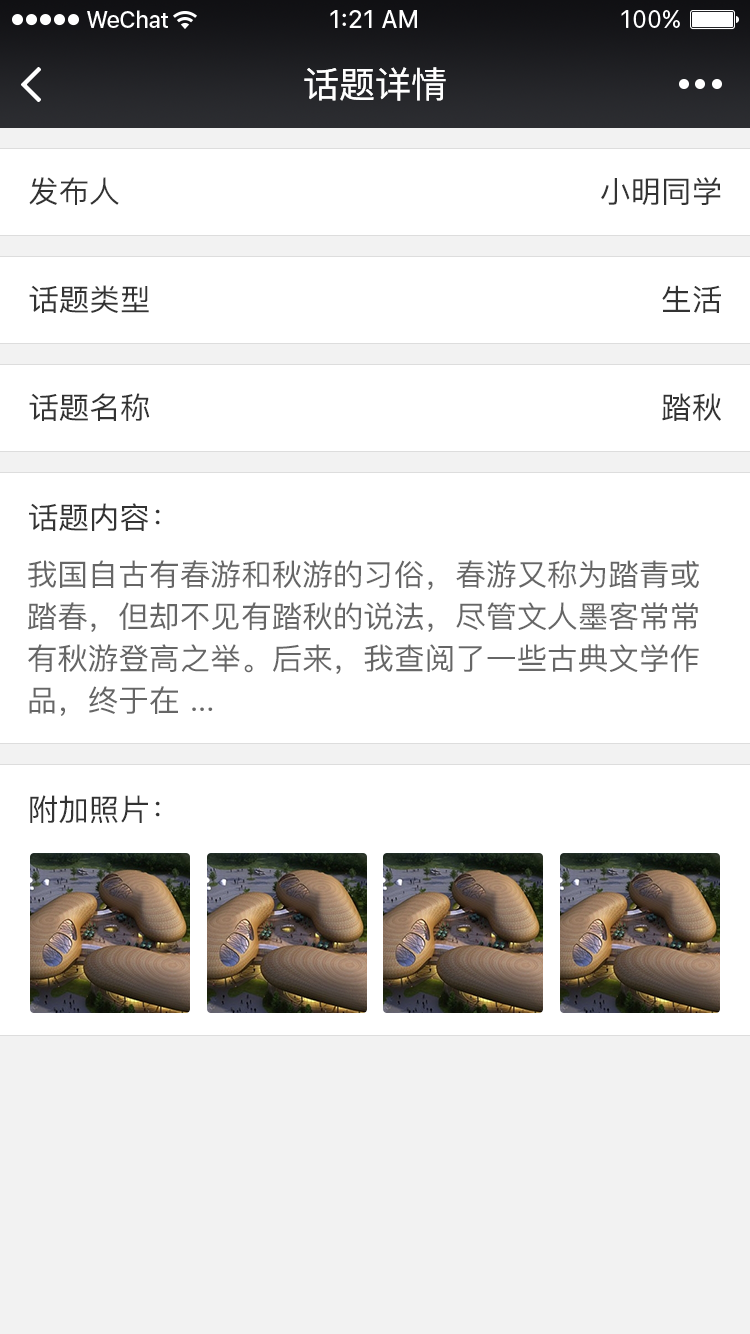
<style>
.page{position:relative;width:750px;height:1334px;background:#ffffff}
.page>*{position:absolute;margin:0}
.t1{font:36px "PingFang-SC-Medium";color:#ffffff}
.t2{font:30px "PingFang-SC-Medium";color:#333333}
.t3{font:30px/42px "PingFang-SC-Medium";color:#666666}
</style>
<div class="page">
<p class="t1" style="left:304px;top:67px;width:142px;height:34px">话题详情</p>
<p class="t2" style="left:29px;top:177px;width:90px;height:28px">发布人</p>
<p class="t2" style="left:601px;top:177px;width:120px;height:28px">小明同学</p>
<p class="t2" style="left:29px;top:285px;width:120px;height:28px">话题类型</p>
<p class="t2" style="left:662px;top:285px;width:59px;height:28px">生活</p>
<p class="t2" style="left:29px;top:393px;width:121px;height:28px">话题名称</p>
<p class="t2" style="left:662px;top:393px;width:59px;height:28px">踏秋</p>
<p class="t2" style="left:29px;top:503px;width:131px;height:28px">话题内容：</p>
<p class="t3" style="left:28px;top:560px;width:671px;height:156px">我国自古有春游和秋游的习俗，春游又称为踏青或<br>踏春，但却不见有踏秋的说法，尽管文人墨客常常<br>有秋游登高之举。后来，我查阅了一些古典文学作<br>品，终于在 ...</p>
<p class="t2" style="left:30px;top:795px;width:130px;height:29px">附加照片：</p>
</div>
